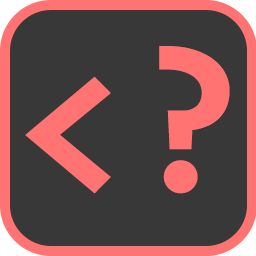
<style>
.page{position:relative;width:256px;height:256px;background:#383838}
.page>*{position:absolute;margin:0}
.t1{font:209.8px "Consolas-Bold";color:#ff7373}
</style>
<div class="page">
<p class="t1" style="left:25px;top:46px;width:205px;height:148px">&lt;?</p>
</div>
